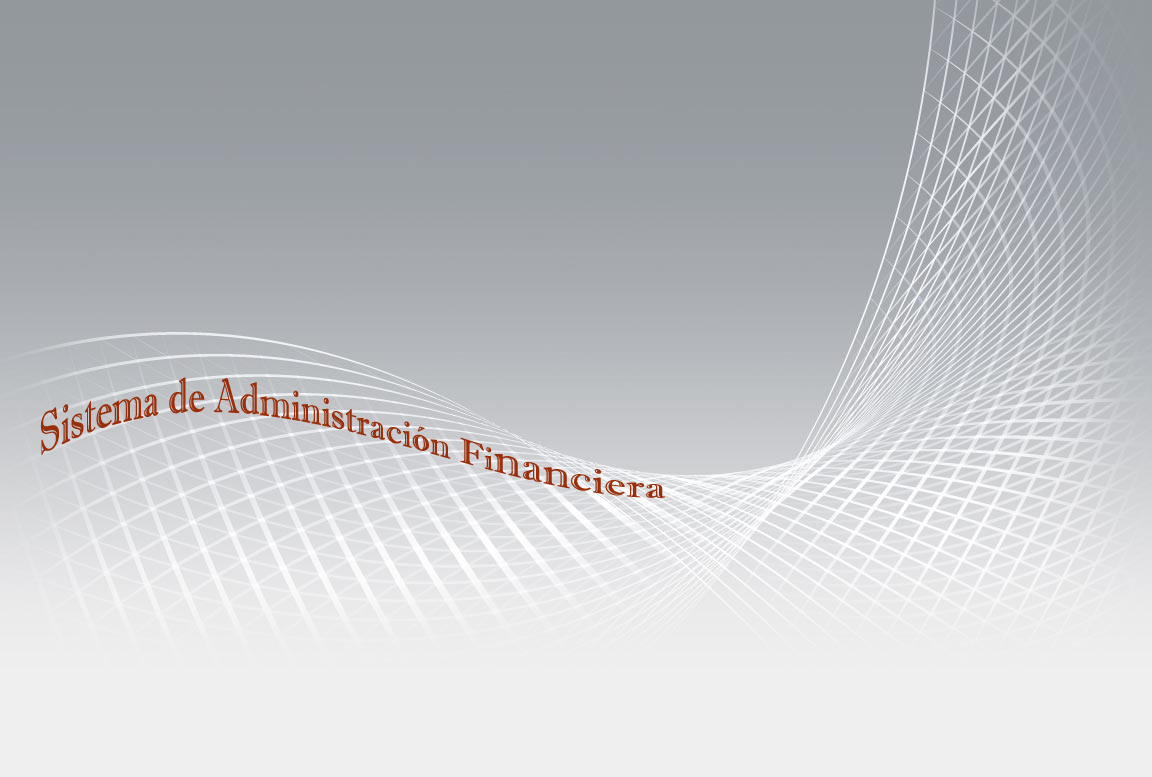
<style>
.page{position:relative;width:1152px;height:777px}
.page>*{position:absolute;margin:0}
.t1{font:36px "ImprintMT-Shadow";color:#992e0a}
.t2{font:48px "ImprintMT-Shadow";color:#992e0a}
</style>
<div class="page">
<p class="t1" style="left:40px;top:377px;width:626px;height:121px">Sistema de Administración Fi<span class="t2">nanciera</span></p>
</div>
